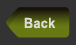
<style>
.page{position:relative;width:76px;height:45px;background:#333333}
.page>*{position:absolute;margin:0}
.t1{font:14px "Arial-BoldMT";letter-spacing:0.025em;color:#dcddda;scale:0.9 1}
</style>
<div class="page">
<p class="t1" style="left:24px;top:17px;width:32px;height:12px">Back</p>
</div>
